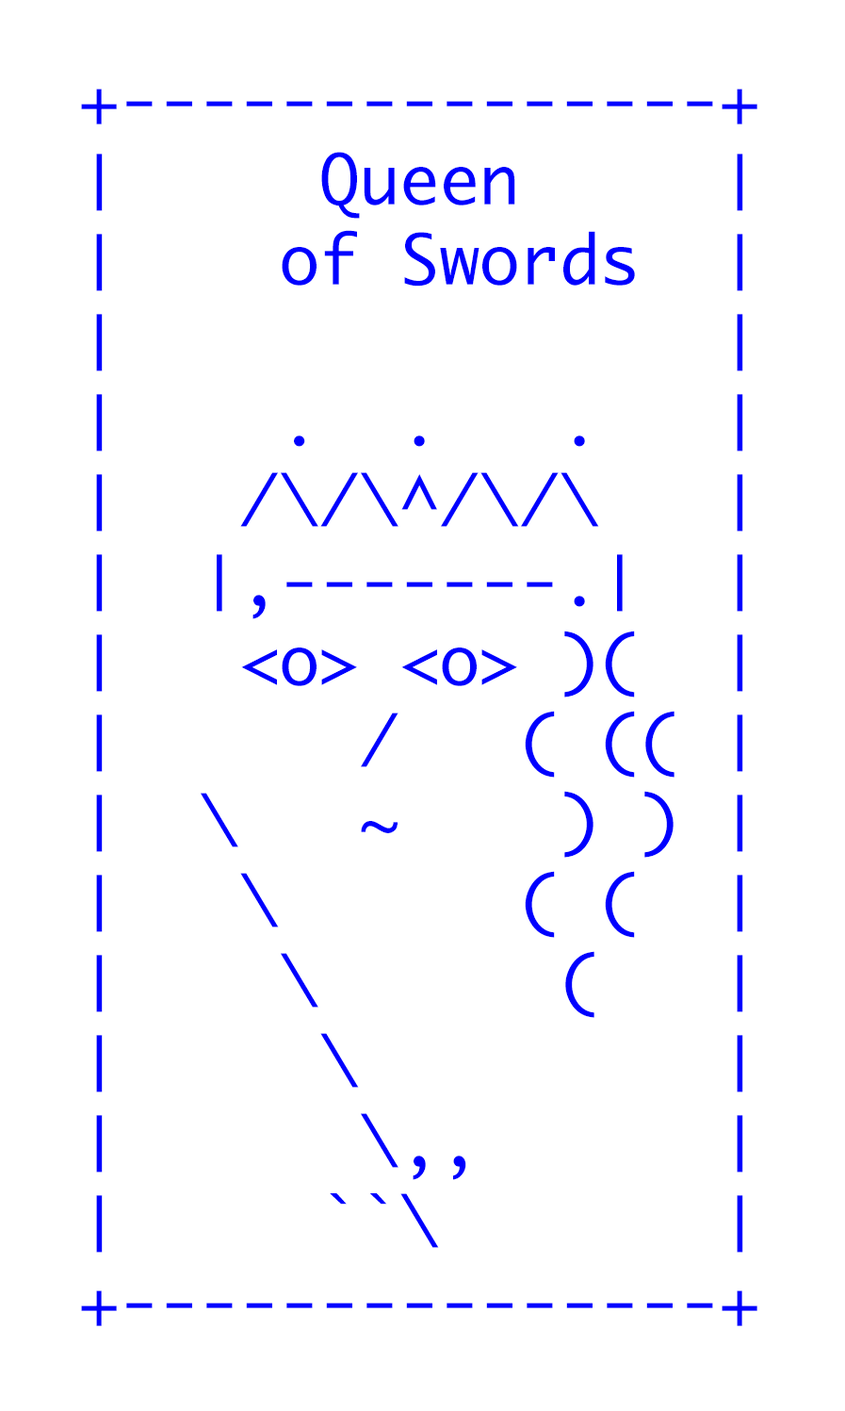
<style>
.page{position:relative;width:845px;height:1411px;background:#ffffff}
.page>*{position:absolute;margin:0}
.t1{font:66.7px "Monaco";color:#0000ff}
</style>
<div class="page">
<p class="t1" style="left:81px;top:89px;width:677px;height:1237px">+---------------+<br>│     Queen     │<br>│    of Swords  │<br>│               │<br>│    .  .   .   │<br>│   /\/\^/\/\   │<br>│  │,-------.│  │<br>│   &lt;o&gt; &lt;o&gt; )(  │ <br>│      /   ( (( │ <br>│  \   ~    ) ) │<br>│   \      ( (  │ <br>│    \      (   │<br>│     \         │<br>│      \,,      │<br>│     ``\       │<br>+---------------+</p>
</div>
